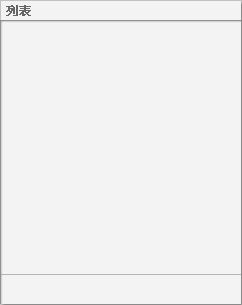
<style>
.page{position:relative;width:242px;height:305px;background:#f3f3f3}
.page>*{position:absolute;margin:0}
.t1{font:12px "SimSun";color:#666666;font-weight:bold}
</style>
<div class="page">
<p class="t1" style="left:6px;top:5px;width:25px;height:11px">列表</p>
</div>
